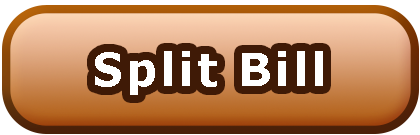
<style>
.page{position:relative;width:420px;height:135px}
.page>*{position:absolute;margin:0}
.t1{font:46px "Tahoma-Bold";letter-spacing:0.1em;color:#ffffff}
</style>
<div class="page">
<p class="t1" style="left:95px;top:51px;width:228px;height:44px">Split Bill</p>
</div>
